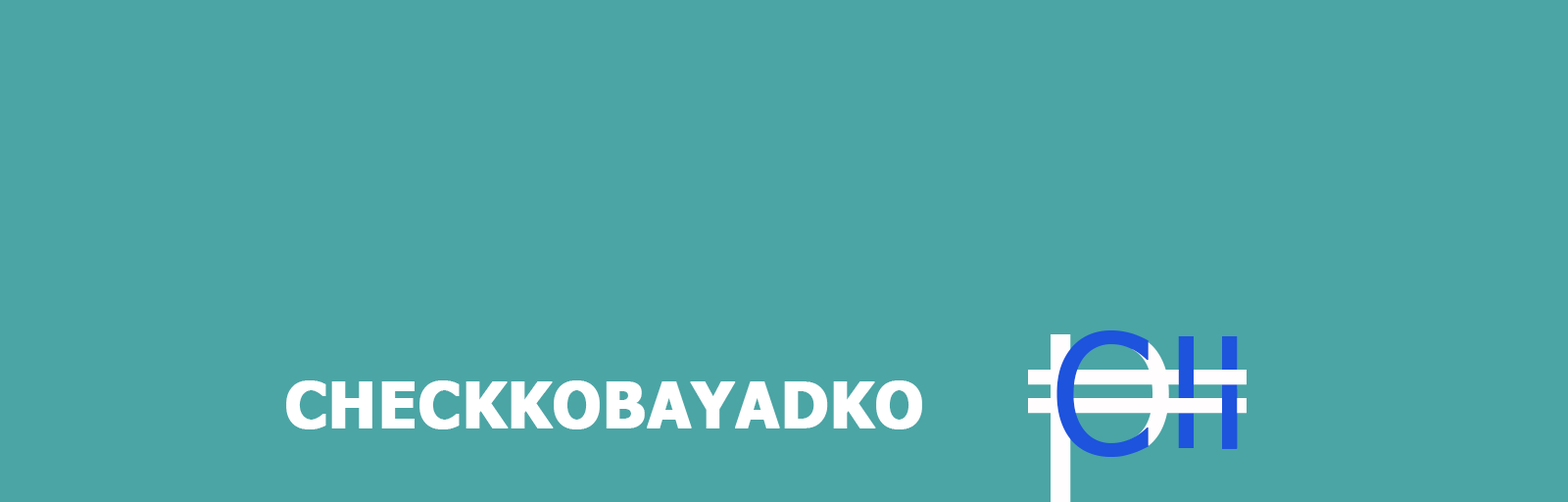
<style>
.page{position:relative;width:1568px;height:502px;background:#4ba5a5}
.page>*{position:absolute;margin:0}
.t1{font:62.7px "Tahoma-Bold";color:#ffffff;text-transform:uppercase;font-weight:bold}
</style>
<div class="page">
<p class="t1" style="left:286px;top:380px;width:636px;height:49px">CheckKoBayadko</p>
</div>
